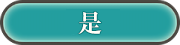
<style>
.page{position:relative;width:180px;height:45px;background:#239e9f}
.page>*{position:absolute;margin:0}
.t1{font:24px "RyuminPr6N-ExBold";color:#fffef8}
</style>
<div class="page">
<p class="t1" style="left:78px;top:11px;width:24px;height:23px">是</p>
</div>
